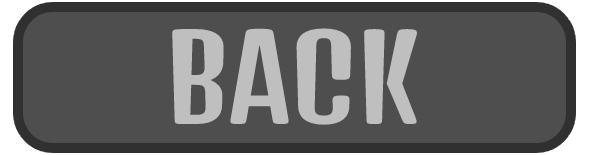
<style>
.page{position:relative;width:589px;height:155px;background:#4e4e4e}
.page>*{position:absolute;margin:0}
.t1{font:115px "DenkOne-Regular";color:#bfbfbf}
</style>
<div class="page">
<p class="t1" style="left:172px;top:28px;width:245px;height:97px">BACK</p>
</div>
